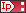
<style>
.page{position:relative;width:26px;height:13px;background:#353535}
.page>*{position:absolute;margin:0}
.t1{font:8.6px "Tahoma";letter-spacing:0.025em;color:#cd0000;scale:1.16 1}
</style>
<div class="page">
<p class="t1" style="left:2px;top:2px;width:9px;height:9px">Ip</p>
</div>
